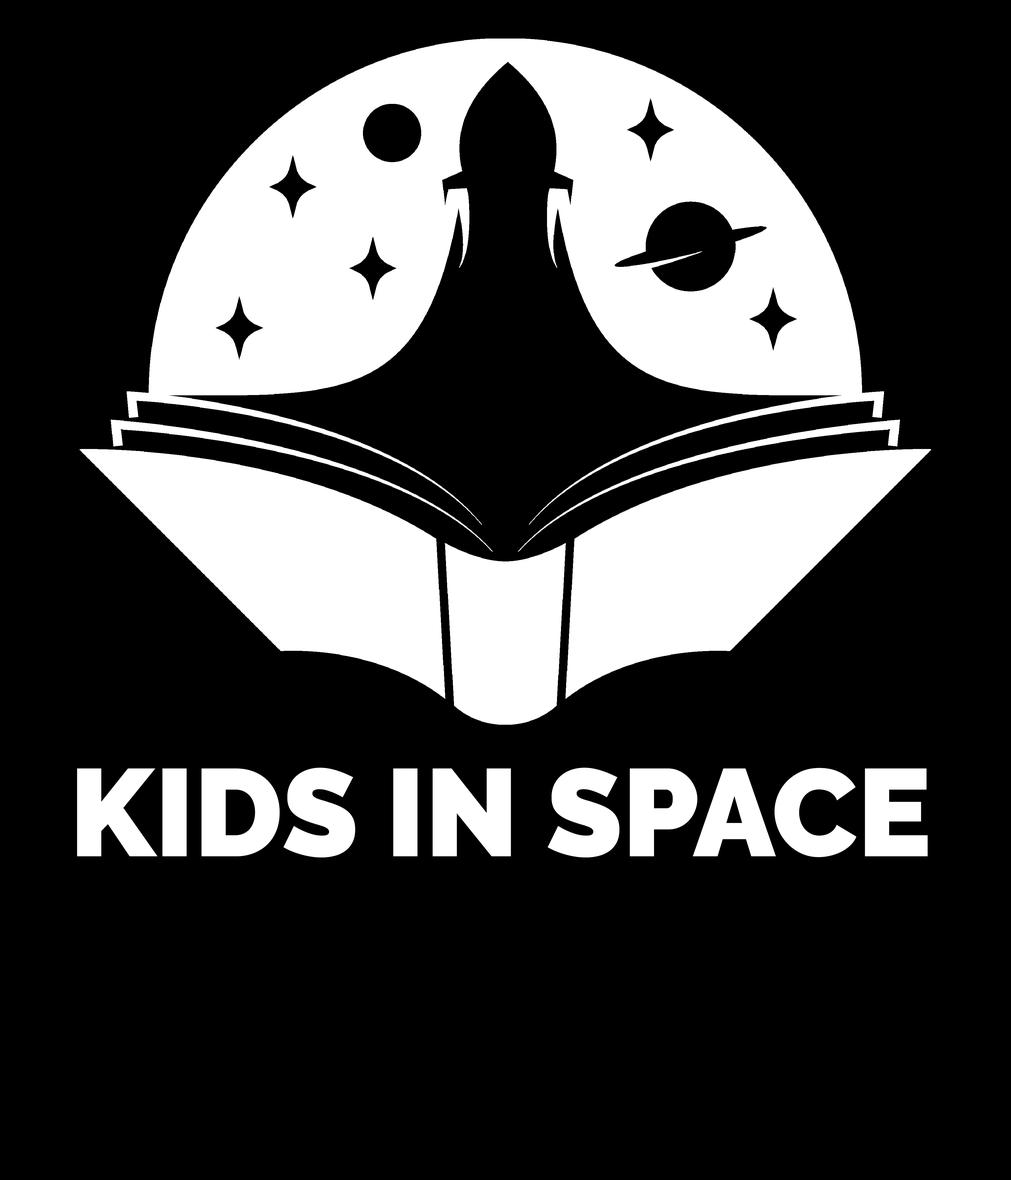
<style>
.page{position:relative;width:1011px;height:1180px;background:#000000}
.page>*{position:absolute;margin:0}
.t1{font:123.6px "Raleway-Black";color:#ffffff}
</style>
<div class="page">
<p class="t1" style="left:77px;top:767px;width:851px;height:90px">KIDS IN SPACE</p>
</div>
